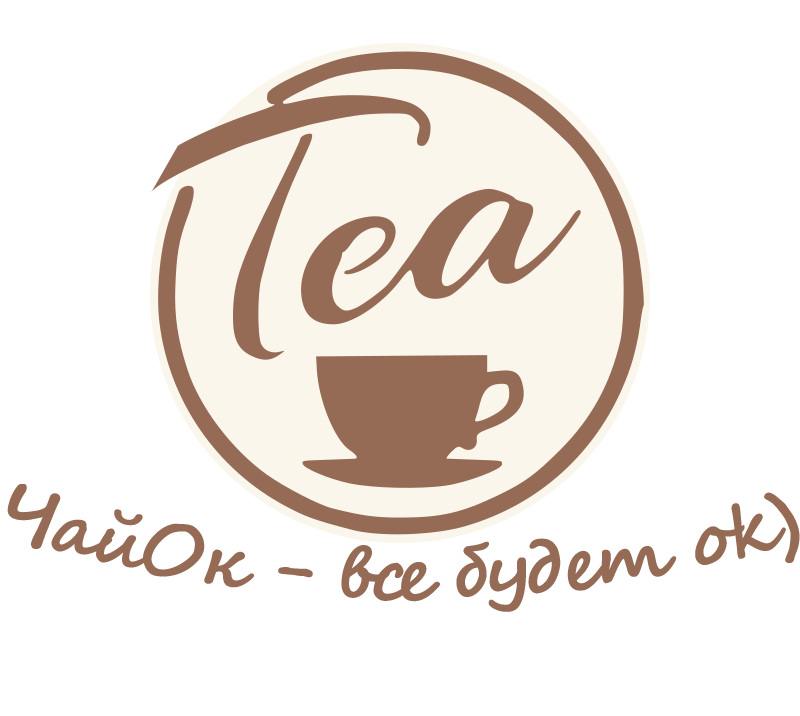
<style>
.page{position:relative;width:800px;height:716px;background:#ffffff}
.page>*{position:absolute;margin:0}
.t1{font:72px "SegoeScript-Bold";letter-spacing:-0.075em;color:#966b56}
</style>
<div class="page">
<p class="t1" style="left:7px;top:484px;width:793px;height:128px">ЧайОк - все будет ok)</p>
</div>
